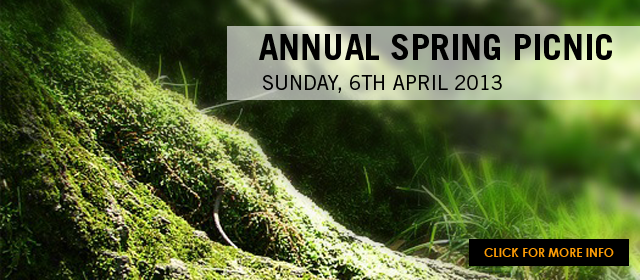
<style>
.page{position:relative;width:640px;height:280px}
.page>*{position:absolute;margin:0}
.t1{font:36px "TradeGothicLTStd-Bold";color:#000000;text-transform:uppercase}
.t2{font:20px "TradeGothicLTStd";color:#000000;text-transform:uppercase}
.t3{font:12px "CenturyGothic-Bold";color:#fb9c06;text-transform:uppercase}
</style>
<div class="page">
<p class="t1" style="left:259px;top:34px;width:353px;height:26px">annual spring picnic</p>
<p class="t2" style="left:263px;top:75px;width:239px;height:18px">Sunday, 6th April 2013</p>
<p class="t3" style="left:484px;top:248px;width:130px;height:9px">click for more info</p>
</div>
